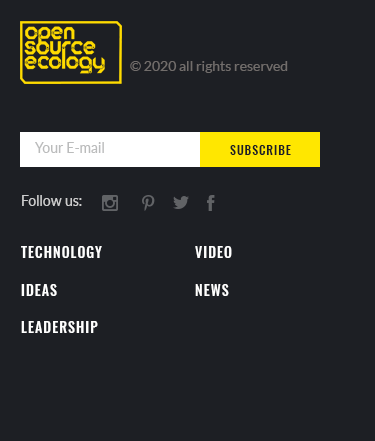
<style>
.page{position:relative;width:375px;height:441px;background:#1d1f24}
.page>*{position:absolute;margin:0}
.t1{font:14px "Lato-Regular";color:#716d6b}
.t2{font:14px "Lato-Regular";color:#bbbcbc}
.t3{font:12px "Oswald-Medium";letter-spacing:0.075em;color:#1d1f24;text-transform:uppercase}
.t4{font:14px "Lato-Regular";color:#cdcdce}
.t5{font:14px "Oswald-Medium";letter-spacing:0.075em;color:#ffffff;text-transform:uppercase}
.t6{font:14px "Oswald-Medium";color:#ffffff;text-transform:uppercase}
</style>
<div class="page">
<p class="t1" style="left:130px;top:61px;width:158px;height:12px">© 2020 all rights reserved</p>
<p class="t2" style="left:35px;top:142px;width:69px;height:11px">Your E-mail</p>
<p class="t3" style="left:230px;top:145px;width:61px;height:10px">Subscribe</p>
<p class="t4" style="left:22px;top:195px;width:60px;height:11px">Follow us:</p>
<p class="t5" style="left:21px;top:246px;width:81px;height:12px">TECHNOLOG<span class="t6">Y</span></p>
<p class="t5" style="left:195px;top:246px;width:37px;height:12px">VIDE<span class="t6">O</span></p>
<p class="t5" style="left:21px;top:284px;width:36px;height:12px">IDEA<span class="t6">S</span></p>
<p class="t5" style="left:195px;top:284px;width:34px;height:12px">NEW<span class="t6">S</span></p>
<p class="t5" style="left:21px;top:321px;width:77px;height:12px">LEADERSHI<span class="t6">P</span></p>
</div>
